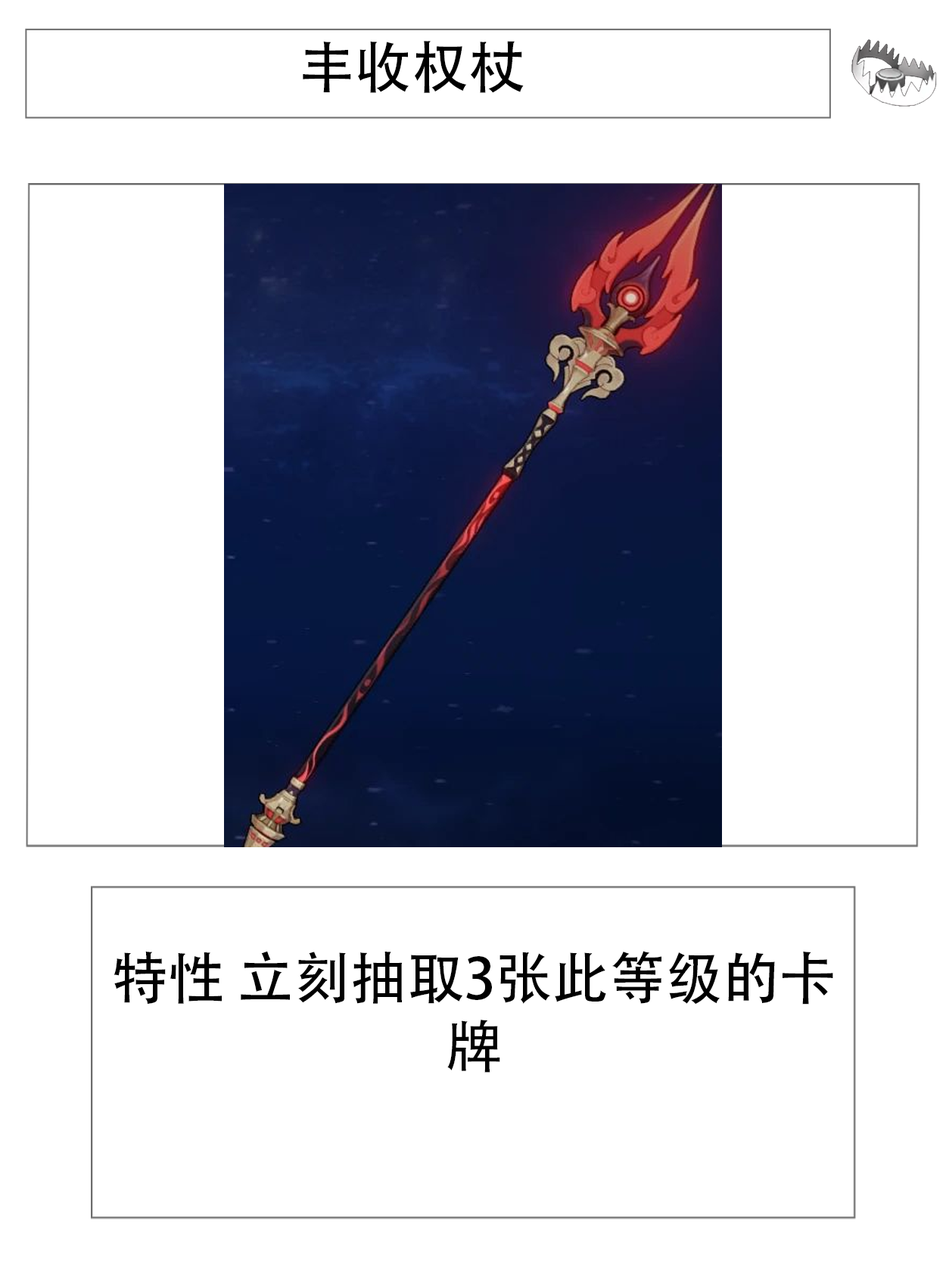
<style>
.page{position:relative;width:946px;height:1261px;background:#ffffff}
.page>*{position:absolute;margin:0}
.t1{font:56.7px "AdobeHeitiStd-Regular";color:#000000}
</style>
<div class="page">
<p class="t1" style="left:303px;top:41px;width:220px;height:52px">丰收权杖</p>
<p class="t1" style="left:113px;top:951px;width:720px;height:122px;text-align:center">特性 立刻抽取3张此等级的卡牌</p>
</div>
